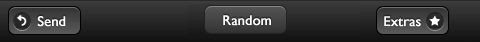
<style>
.page{position:relative;width:480px;height:42px}
.page>*{position:absolute;margin:0}
.t1{font:14px "GillSansMT";color:#ffffff;font-weight:bold}
</style>
<div class="page">
<p class="t1" style="left:37px;top:16px;width:29px;height:11px">Send</p>
<p class="t1" style="left:223px;top:15px;width:48px;height:11px">Random</p>
<p class="t1" style="left:384px;top:16px;width:37px;height:11px">Extras</p>
</div>
